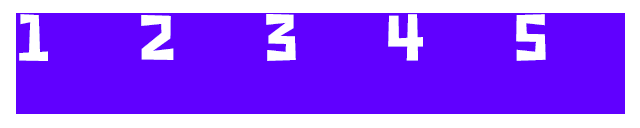
<style>
.page{position:relative;width:640px;height:128px;background:#6000ff}
.page>*{position:absolute;margin:0}
.t1{font:72px "HYZhuZiMuTouRenW";color:#ffffff}
</style>
<div class="page">
<p class="t1" style="left:19px;top:14px;width:527px;height:47px">1   2   3   4   5</p>
</div>
